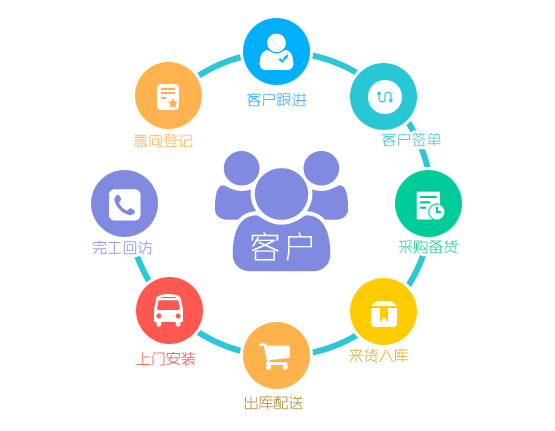
<style>
.page{position:relative;width:555px;height:431px;background:#ffffff}
.page>*{position:absolute;margin:0}
.t1{font:15.9px "ZHSRXT--GBK1-0";letter-spacing:-0.05em}
.t2{font:33.2px "ZHSRXT--GBK1-0";letter-spacing:0.05em;color:#ffffff}
.t3{font:15.9px "ZHSRXT--GBK1-0";letter-spacing:-0.05em;color:#808ae1}
</style>
<div class="page">
<p class="t1" style="left:247px;top:92px;width:60px;height:15px">客户跟进</p>
<p class="t1" style="left:133px;top:133px;width:60px;height:15px">意向登记</p>
<p class="t1" style="left:382px;top:132px;width:59px;height:15px">客户签单</p>
<p class="t2" style="left:251px;top:232px;width:61px;height:29px">客户</p>
<p class="t3" style="left:93px;top:240px;width:60px;height:15px">完工回访</p>
<p class="t1" style="left:398px;top:239px;width:60px;height:15px">采购备货</p>
<p class="t1" style="left:136px;top:351px;width:60px;height:15px">上门安装</p>
<p class="t1" style="left:349px;top:348px;width:60px;height:15px">来货入库</p>
<p class="t1" style="left:245px;top:395px;width:58px;height:15px">出库配送</p>
</div>
